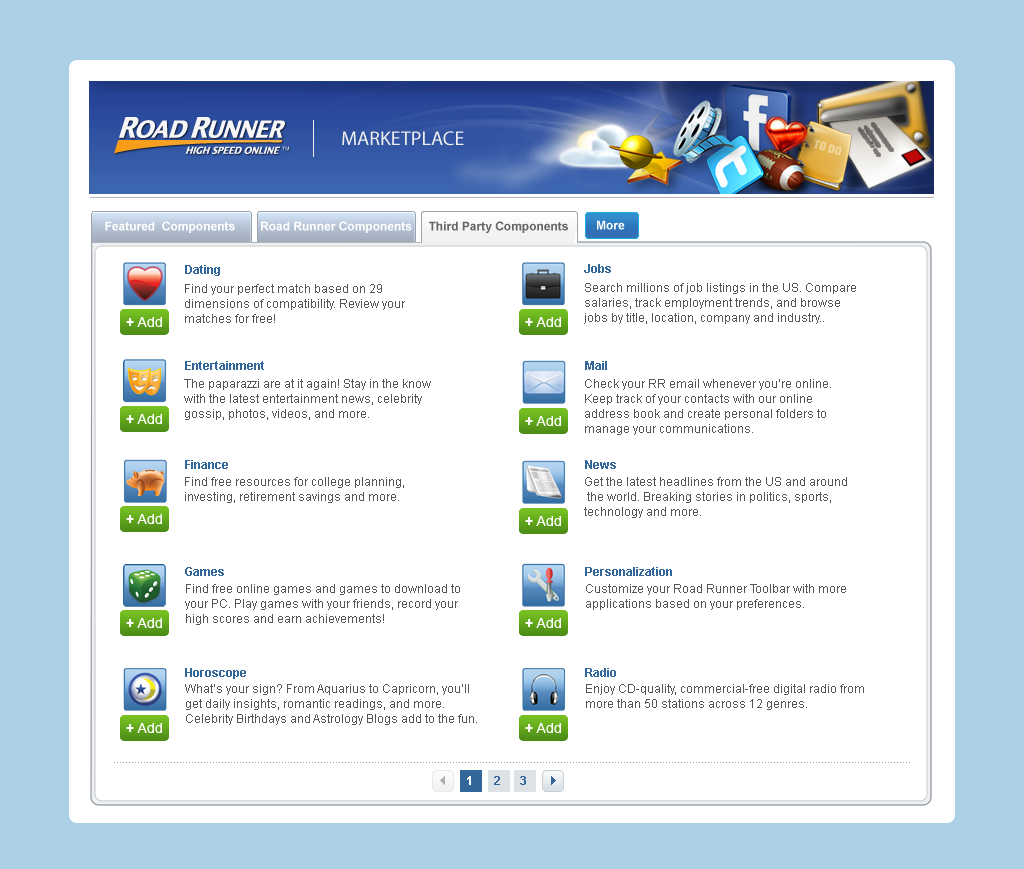
<style>
.page{position:relative;width:1024px;height:869px;background:#ffffff}
.page>*{position:absolute;margin:0}
.t1{font:20px "MyriadPro-Regular";color:#eeeeee}
.t2{font:12px "Arial-BoldMT";color:#ffffff}
.t3{font:12px "Arial-BoldMT";color:#666666}
.t4{font:12px "Arial-BoldMT";color:#336699}
.t5{font:12px/15px "ArialMT";color:#555555}
</style>
<div class="page">
<p class="t1" style="left:342px;top:131px;width:122px;height:15px">MARKETPLACE</p>
<p class="t2" style="left:105px;top:221px;width:130px;height:12px">Featured  Components</p>
<p class="t2" style="left:261px;top:221px;width:151px;height:12px">Road Runner Components</p>
<p class="t3" style="left:429px;top:221px;width:139px;height:12px">Third Party Components</p>
<p class="t2" style="left:597px;top:220px;width:28px;height:10px">More</p>
<p class="t4" style="left:185px;top:265px;width:35px;height:11px">Dating</p>
<p class="t4" style="left:584px;top:264px;width:27px;height:9px">Jobs</p>
<p class="t5" style="left:185px;top:284px;width:220px;height:39px">Find your perfect match based on 29 <br>dimensions of compatibility. Review your <br>matches for free!</p>
<p class="t5" style="left:584px;top:283px;width:272px;height:41px">Search millions of job listings in the US. Compare <br>salaries, track employment trends, and browse <br>jobs by title, location, company and industry..</p>
<p class="t4" style="left:185px;top:361px;width:79px;height:9px">Entertainment</p>
<p class="t4" style="left:585px;top:361px;width:22px;height:9px">Mail</p>
<p class="t5" style="left:184px;top:379px;width:247px;height:41px">The paparazzi are at it again! Stay in the know <br>with the latest entertainment news, celebrity <br>gossip, photos, videos, and more.</p>
<p class="t5" style="left:585px;top:379px;width:246px;height:56px">Check your RR email whenever you’re online. <br>Keep track of your contacts with our online <br>address book and create personal folders to <br>manage your communications.</p>
<p class="t4" style="left:185px;top:460px;width:43px;height:9px">Finance</p>
<p class="t4" style="left:585px;top:460px;width:31px;height:9px">News</p>
<p class="t5" style="left:185px;top:477px;width:219px;height:26px">Find free resources for college planning, <br>investing, retirement savings and more.</p>
<p class="t5" style="left:584px;top:477px;width:263px;height:41px">Get the latest headlines from the US and around <br> the world. Breaking stories in politics, sports, <br>technology and more.</p>
<p class="t4" style="left:185px;top:567px;width:39px;height:9px">Games</p>
<p class="t4" style="left:585px;top:567px;width:87px;height:9px">Personalization</p>
<p class="t5" style="left:185px;top:584px;width:275px;height:41px">Find free online games and games to download to <br>your PC. Play games with your friends, record your <br>high scores and earn achievements!</p>
<p class="t5" style="left:586px;top:584px;width:260px;height:26px">Customize your Road Runner Toolbar with more <br>applications based on your preferences.</p>
<p class="t4" style="left:185px;top:668px;width:61px;height:11px">Horoscope</p>
<p class="t4" style="left:585px;top:668px;width:31px;height:9px">Radio</p>
<p class="t5" style="left:185px;top:684px;width:292px;height:41px">What’s your sign? From Aquarius to Capricorn, you’ll <br>get daily insights, romantic readings, and more. <br>Celebrity Birthdays and Astrology Blogs add to the fun.</p>
<p class="t5" style="left:586px;top:684px;width:278px;height:26px">Enjoy CD-quality, commercial-free digital radio from <br>more than 50 stations across 12 genres.</p>
<p class="t2" style="left:467px;top:776px;width:4px;height:9px">1</p>
<p class="t4" style="left:494px;top:776px;width:6px;height:9px">2</p>
<p class="t4" style="left:520px;top:776px;width:6px;height:9px">3</p>
</div>
